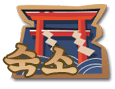
<style>
.page{position:relative;width:115px;height:89px;background:#ffffff}
.page>*{position:absolute;margin:0}
.t1{font:35.6px "SDKukdetopokki-bBd";letter-spacing:0.02em;color:#dbb17f;scale:1.11 1}
</style>
<div class="page">
<p class="t1" style="left:4px;top:44px;width:73px;height:33px">숙소</p>
</div>
